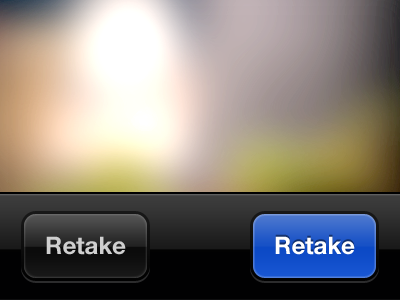
<style>
.page{position:relative;width:400px;height:300px}
.page>*{position:absolute;margin:0}
.t1{font:24px "HelveticaNeue-Bold";color:#cfcfcf}
.t2{font:24px "HelveticaNeue-Bold";color:#ffffff}
</style>
<div class="page">
<p class="t1" style="left:46px;top:236px;width:80px;height:19px">Retake</p>
<p class="t2" style="left:275px;top:236px;width:80px;height:19px">Retake</p>
</div>
